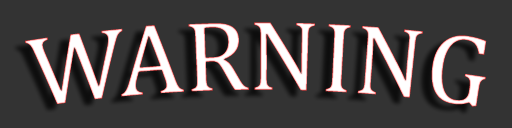
<style>
.page{position:relative;width:512px;height:128px;background:#333333}
.page>*{position:absolute;margin:0}
.t1{font:100px "Cambria";letter-spacing:0.005em;color:#ffffff}
</style>
<div class="page">
<p class="t1" style="left:25px;top:22px;width:462px;height:85px">WARNING</p>
</div>
